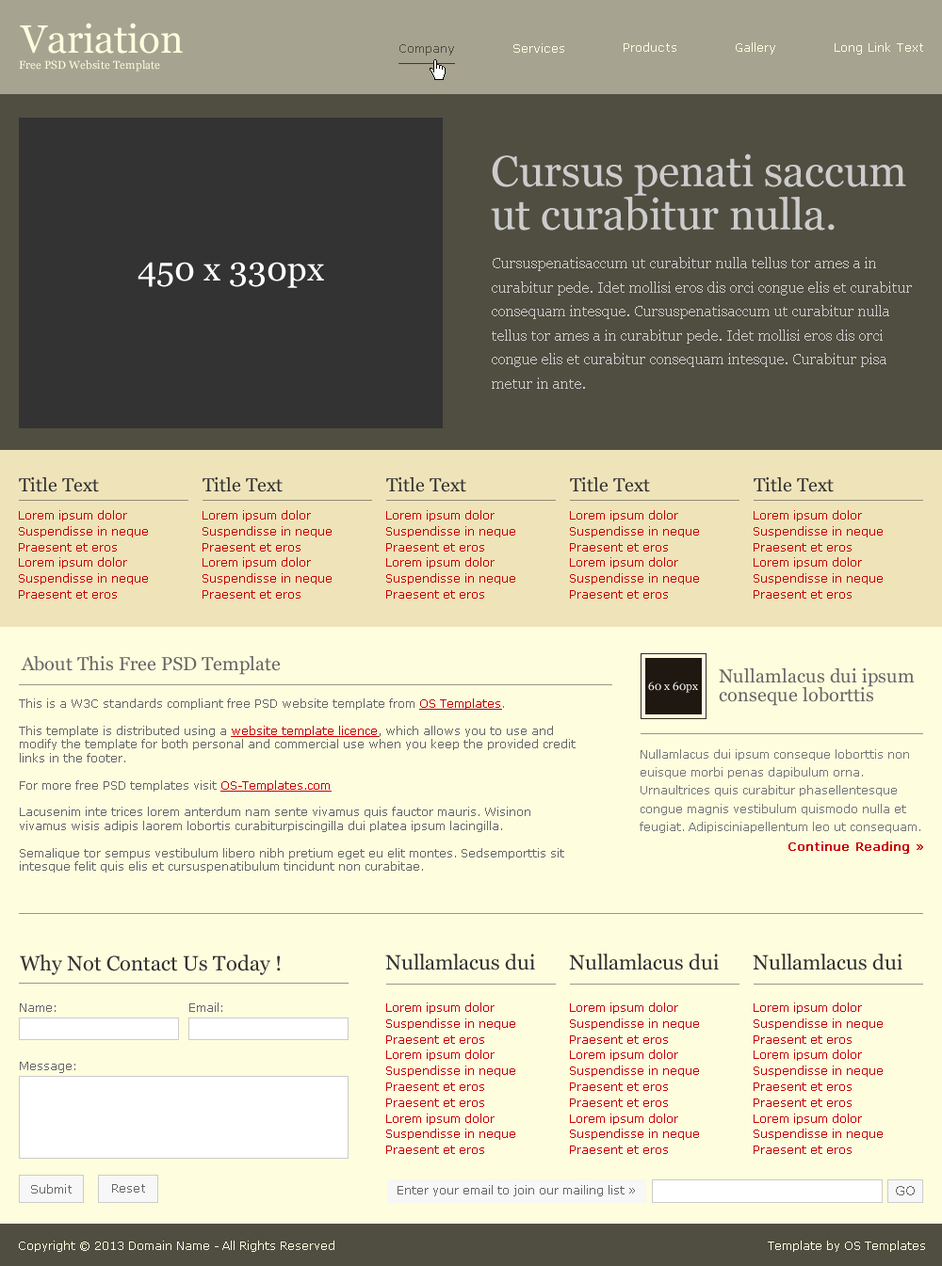
<style>
.page{position:relative;width:942px;height:1266px;background:#fefdde}
.page>*{position:absolute;margin:0}
.t1{font:39.5px "Georgia";color:#fefdde}
.t2{font:12.2px "Verdana";color:#504e41}
.t3{font:12.2px "Verdana";color:#fefdde}
.t4{font:11.3px "Georgia";color:#fefdde}
.t5{font:43.3px/43.3px "Georgia";color:#cccccc}
.t6{font:15.1px/24.1px "Georgia";color:#cccccc}
.t7{font:33.9px "Georgia";color:#ffffff}
.t8{font:18.8px "Georgia";color:#333333}
.t9{font:11.3px/15.8px "Verdana";color:#c80000}
.t10{font:18.8px "Georgia";color:#666666}
.t11{font:18.8px/18.8px "Georgia";color:#666666}
.t12{font:11.3px "Georgia";color:#ffffff}
.t13{font:11.3px/13.6px "Verdana";color:#666666}
.t14{font:11.3px/13.6px "Verdana";color:#c80000;text-decoration:underline}
.t15{font:11.3px/18.1px "Verdana";color:#777777}
.t16{font:12.2px "Verdana";color:#c80000;font-weight:bold}
.t17{font:20.7px "Georgia";color:#333333}
.t18{font:12.2px "Verdana";color:#666666}
.t19{font:11.3px "Verdana";color:#666666}
.t20{font:13.2px "Verdana";color:#666666}
.t21{font:11.3px "Verdana";color:#fefdde}
</style>
<div class="page">
<p class="t1" style="left:20px;top:23px;width:163px;height:31px">Variation</p>
<p class="t2" style="left:399px;top:44px;width:55px;height:12px">Company</p>
<p class="t3" style="left:513px;top:43px;width:51px;height:10px">Services</p>
<p class="t3" style="left:623px;top:42px;width:53px;height:10px">Products</p>
<p class="t3" style="left:735px;top:42px;width:40px;height:13px">Gallery</p>
<p class="t3" style="left:834px;top:42px;width:89px;height:13px">Long Link Text</p>
<p class="t4" style="left:19px;top:60px;width:141px;height:12px">Free PSD Website Template</p>
<p class="t5" style="left:491px;top:153px;width:415px;height:78px">Cursus penati saccum ut curabitur nulla.</p>
<p class="t6" style="left:492px;top:257px;width:419px;height:132px">Cursuspenatisaccum ut curabitur nulla tellus tor ames a in curabitur pede. Idet mollisi eros dis orci congue elis et curabitur consequam intesque. Cursuspenatisaccum ut curabitur nulla tellus tor ames a in curabitur pede. Idet mollisi eros dis orci congue elis et curabitur consequam intesque. Curabitur pisa metur in ante.</p>
<p class="t7" style="left:137px;top:262px;width:187px;height:26px">450 x 330px</p>
<p class="t8" style="left:19px;top:477px;width:80px;height:15px">Title Text</p>
<p class="t8" style="left:202px;top:477px;width:80px;height:15px">Title Text</p>
<p class="t8" style="left:386px;top:477px;width:80px;height:15px">Title Text</p>
<p class="t8" style="left:570px;top:477px;width:80px;height:15px">Title Text</p>
<p class="t8" style="left:753px;top:477px;width:80px;height:15px">Title Text</p>
<p class="t9" style="left:19px;top:510px;width:129px;height:89px">Lorem ipsum dolor<br>Suspendisse in neque<br>Praesent et eros<br>Lorem ipsum dolor<br>Suspendisse in neque<br>Praesent et eros</p>
<p class="t9" style="left:202px;top:510px;width:129px;height:89px">Lorem ipsum dolor<br>Suspendisse in neque<br>Praesent et eros<br>Lorem ipsum dolor<br>Suspendisse in neque<br>Praesent et eros</p>
<p class="t9" style="left:386px;top:510px;width:129px;height:89px">Lorem ipsum dolor<br>Suspendisse in neque<br>Praesent et eros<br>Lorem ipsum dolor<br>Suspendisse in neque<br>Praesent et eros</p>
<p class="t9" style="left:570px;top:510px;width:129px;height:89px">Lorem ipsum dolor<br>Suspendisse in neque<br>Praesent et eros<br>Lorem ipsum dolor<br>Suspendisse in neque<br>Praesent et eros</p>
<p class="t9" style="left:753px;top:510px;width:129px;height:89px">Lorem ipsum dolor<br>Suspendisse in neque<br>Praesent et eros<br>Lorem ipsum dolor<br>Suspendisse in neque<br>Praesent et eros</p>
<p class="t10" style="left:21px;top:656px;width:260px;height:19px">About This Free PSD Template</p>
<p class="t11" style="left:718px;top:669px;width:196px;height:37px">Nullamlacus dui ipsum <br>conseque loborttis</p>
<p class="t12" style="left:648px;top:682px;width:50px;height:11px">60 x 60px</p>
<p class="t13" style="left:19px;top:699px;width:556px;height:174px">This is a W3C standards compliant free PSD website template from <span class="t14">OS Templates</span>.<br><br>This template is distributed using a <span class="t14">website template licence</span>, which allows you to use and modify the template for both personal and commercial use when you keep the provided credit links in the footer.<br><br>For more free PSD templates visit <span class="t14">OS-Templates.com</span><br><br>Lacusenim inte trices lorem anterdum nam sente vivamus quis fauctor mauris. Wisinon vivamus wisis adipis laorem lobortis curabiturpiscingilla dui platea ipsum lacingilla.<br><br>Semalique tor sempus vestibulum libero nibh pretium eget eu elit montes. Sedsemporttis sit intesque felit quis elis et cursuspenatibulum tincidunt non curabitae.</p>
<p class="t15" style="left:639px;top:749px;width:281px;height:84px">Nullamlacus dui ipsum conseque loborttis non <br>euisque morbi penas dapibulum orna. <br>Urnaultrices quis curabitur phasellentesque <br>congue magnis vestibulum quismodo nulla et <br>feugiat. Adipisciniapellentum leo ut consequam.</p>
<p class="t16" style="left:788px;top:842px;width:135px;height:12px">Continue Reading »</p>
<p class="t17" style="left:385px;top:954px;width:150px;height:17px">Nullamlacus dui</p>
<p class="t17" style="left:569px;top:954px;width:149px;height:17px">Nullamlacus dui</p>
<p class="t17" style="left:752px;top:954px;width:150px;height:17px">Nullamlacus dui</p>
<p class="t17" style="left:20px;top:955px;width:261px;height:20px">Why Not Contact Us Today !</p>
<p class="t18" style="left:20px;top:1004px;width:36px;height:8px">Name:</p>
<p class="t18" style="left:189px;top:1003px;width:33px;height:9px">Email:</p>
<p class="t9" style="left:386px;top:1003px;width:129px;height:151px">Lorem ipsum dolor<br>Suspendisse in neque<br>Praesent et eros<br>Lorem ipsum dolor<br>Suspendisse in neque<br>Praesent et eros<br>Praesent et eros<br>Lorem ipsum dolor<br>Suspendisse in neque<br>Praesent et eros</p>
<p class="t9" style="left:570px;top:1003px;width:129px;height:151px">Lorem ipsum dolor<br>Suspendisse in neque<br>Praesent et eros<br>Lorem ipsum dolor<br>Suspendisse in neque<br>Praesent et eros<br>Praesent et eros<br>Lorem ipsum dolor<br>Suspendisse in neque<br>Praesent et eros</p>
<p class="t9" style="left:753px;top:1003px;width:129px;height:151px">Lorem ipsum dolor<br>Suspendisse in neque<br>Praesent et eros<br>Lorem ipsum dolor<br>Suspendisse in neque<br>Praesent et eros<br>Praesent et eros<br>Lorem ipsum dolor<br>Suspendisse in neque<br>Praesent et eros</p>
<p class="t18" style="left:20px;top:1062px;width:55px;height:11px">Message:</p>
<p class="t18" style="left:31px;top:1185px;width:41px;height:9px">Submit</p>
<p class="t18" style="left:112px;top:1185px;width:33px;height:8px">Reset</p>
<p class="t19" style="left:397px;top:1185px;width:238px;height:12px">Enter your email to join our mailing list »</p>
<p class="t20" style="left:895px;top:1186px;width:19px;height:10px">GO</p>
<p class="t21" style="left:19px;top:1241px;width:315px;height:11px">Copyright © 2013 Domain Name - All Rights Reserved</p>
<p class="t21" style="left:767px;top:1241px;width:158px;height:11px">Template by OS Templates</p>
</div>
